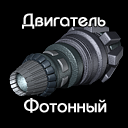
<style>
.page{position:relative;width:128px;height:128px;background:#000000}
.page>*{position:absolute;margin:0}
.t1{font:18px "BauhausC-Medium";color:#ffffff;font-weight:bold}
</style>
<div class="page">
<p class="t1" style="left:22px;top:13px;width:84px;height:16px">Двигатель</p>
<p class="t1" style="left:24px;top:98px;width:83px;height:15px">Фотонный</p>
</div>
